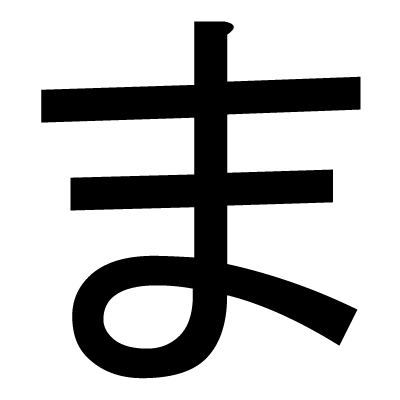
<style>
.page{position:relative;width:400px;height:400px;background:#ffffff}
.page>*{position:absolute;margin:0}
.t1{font:416.7px "MS-PGothic";color:#000000}
</style>
<div class="page">
<p class="t1" style="left:41px;top:21px;width:320px;height:358px">ま</p>
</div>
